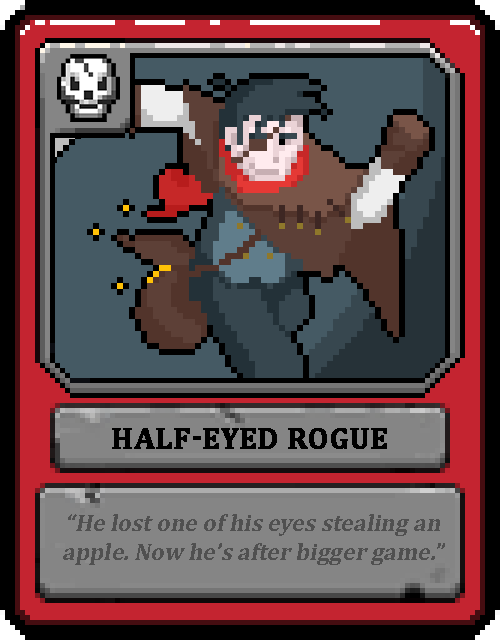
<style>
.page{position:relative;width:500px;height:640px}
.page>*{position:absolute;margin:0}
.t1{font:30px "Cambria-Bold";color:#000000;text-transform:uppercase;font-weight:bold}
.t2{font:24px "Cambria-Bold";color:#505050;font-style:italic}
</style>
<div class="page">
<p class="t1" style="left:112px;top:428px;width:275px;height:21px">Half-Eyed rogue</p>
<p class="t2" style="left:63px;top:514px;width:382px;height:51px;text-align:center">“He lost one of his eyes stealing an apple. Now he’s after bigger game.”</p>
</div>
